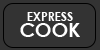
<style>
.page{position:relative;width:100px;height:50px;background:#333333}
.page>*{position:absolute;margin:0}
.t1{font:12.3px "CenturyGothic-Bold";color:#ffffff}
.t2{font:19.7px "CenturyGothic-Bold";color:#ffffff}
</style>
<div class="page">
<p class="t1" style="left:27px;top:12px;width:46px;height:9px">EXPRESS</p>
<p class="t2" style="left:20px;top:23px;width:60px;height:14px">COOK</p>
</div>
